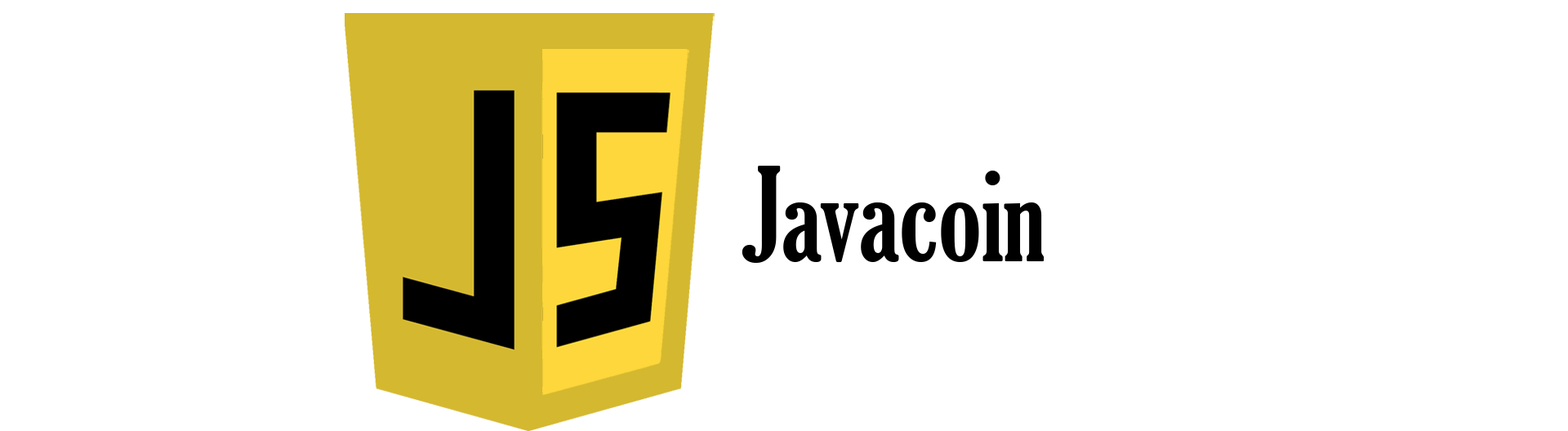
<style>
.page{position:relative;width:1568px;height:431px;background:#ffffff}
.page>*{position:absolute;margin:0}
.t1{font:126.2px "GloucesterMT-ExtraCondensed";color:#000000}
</style>
<div class="page">
<p class="t1" style="left:742px;top:166px;width:303px;height:97px">Javacoin</p>
</div>
